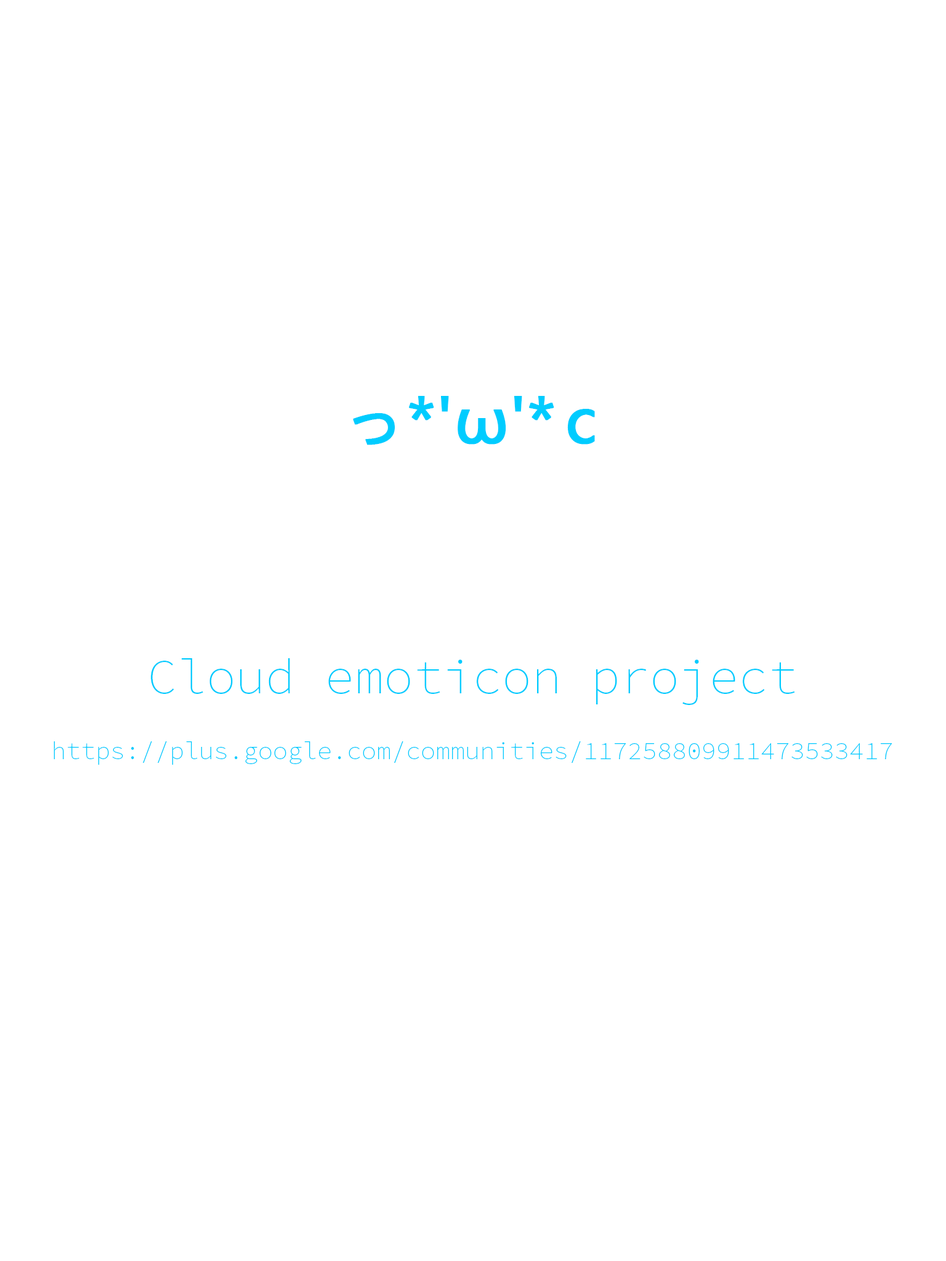
<style>
.page{position:relative;width:946px;height:1261px;background:#ffffff}
.page>*{position:absolute;margin:0}
.t1{font:61.6px "MicrosoftYaHei";color:#00ccff;font-weight:bold}
.t2{font:24.6px "SourceCodePro-ExtraLight";color:#00ccff}
.t3{font:49.3px "SourceCodePro-ExtraLight";color:#00ccff}
</style>
<div class="page">
<p class="t1" style="left:353px;top:396px;width:242px;height:49px">っ*'ω'* c</p>
<p class="t2" style="left:54px;top:658px;width:838px;height:107px;text-align:center"><span class="t3">Cloud emoticon project<br></span>https://plus.google.com/communities/117258809911473533417</p>
</div>
